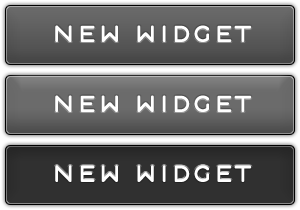
<style>
.page{position:relative;width:300px;height:210px}
.page>*{position:absolute;margin:0}
.t1{font:46px "Estilo";letter-spacing:-0.02em;color:#ffffff;font-weight:bold}
</style>
<div class="page">
<p class="t1" style="left:55px;top:25px;width:197px;height:17px">new widget</p>
<p class="t1" style="left:55px;top:95px;width:197px;height:17px">new widget</p>
<p class="t1" style="left:55px;top:165px;width:197px;height:17px">new widget</p>
</div>
